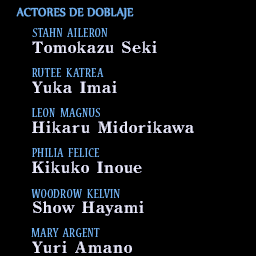
<style>
.page{position:relative;width:256px;height:256px;background:#000000}
.page>*{position:absolute;margin:0}
.t1{font:14px "Nyala-Regular";color:#70b0f0;font-weight:bold;scale:0.9 1}
.t2{font:14px "NuevaStd-Cond";letter-spacing:0.04em;color:#70b0f0}
</style>
<div class="page">
<p class="t1" style="left:16px;top:7px;width:118px;height:13px">ACTORES DE DOBLAJE</p>
<p class="t2" style="left:32px;top:28px;width:76px;height:9px">STAHN  AILERON</p>
<p class="t2" style="left:32px;top:68px;width:72px;height:9px">RUTEE  KATREA</p>
<p class="t2" style="left:32px;top:108px;width:68px;height:9px">LEON  MAGNUS</p>
<p class="t2" style="left:32px;top:148px;width:68px;height:9px">PHILIA  FELICE</p>
<p class="t2" style="left:31px;top:189px;width:89px;height:9px">WOODROW  KELVIN</p>
<p class="t2" style="left:31px;top:228px;width:69px;height:9px">MARY  ARGENT</p>
</div>
